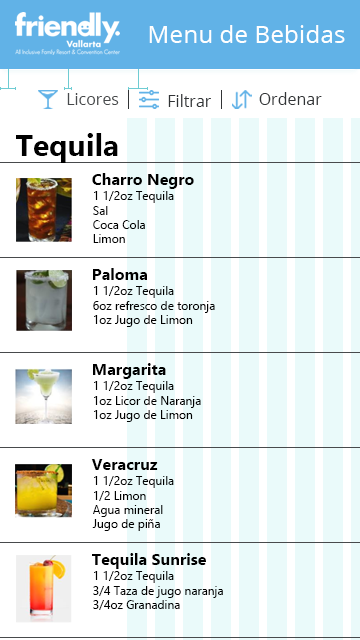
<style>
.page{position:relative;width:360px;height:640px;background:#ffffff}
.page>*{position:absolute;margin:0}
.t1{font:24.4px "OpenSans";color:#ffffff}
.t2{font:16px "OpenSans";color:#484a4c}
.t3{font:16px "OpenSans";color:#313436}
.t4{font:30px "Gadugi-Bold";color:#000000}
.t5{font:16px "Gadugi-Bold";color:#000000}
.t6{font:12px "Gadugi";color:#000000}
</style>
<div class="page">
<p class="t1" style="left:149px;top:25px;width:196px;height:18px">Menu de Bebidas</p>
<p class="t2" style="left:67px;top:93px;width:52px;height:12px">Licores</p>
<p class="t3" style="left:168px;top:94px;width:43px;height:13px">Filtrar</p>
<p class="t3" style="left:259px;top:92px;width:63px;height:13px">Ordenar</p>
<p class="t4" style="left:16px;top:133px;width:102px;height:30px">Tequila</p>
<p class="t5" style="left:92px;top:173px;width:102px;height:16px">Charro Negro</p>
<p class="t6" style="left:93px;top:191px;width:81px;height:52px">1 1/2oz Tequila<br>Sal<br>Coca Cola<br>Limon</p>
<p class="t5" style="left:93px;top:268px;width:54px;height:12px">Paloma</p>
<p class="t6" style="left:93px;top:286px;width:122px;height:41px">1 1/2oz Tequila<br>6oz refresco de toronja<br>1oz Jugo de Limon</p>
<p class="t5" style="left:93px;top:363px;width:73px;height:16px">Margarita</p>
<p class="t6" style="left:94px;top:381px;width:107px;height:41px">1 1/2oz Tequila<br>1oz Licor de Naranja<br>1oz Jugo de Limon</p>
<p class="t5" style="left:91px;top:459px;width:67px;height:11px">Veracruz</p>
<p class="t6" style="left:92px;top:476px;width:82px;height:55px">1 1/2oz Tequila<br>1/2 Limon<br>Agua mineral<br>Jugo de piña</p>
<p class="t5" style="left:92px;top:553px;width:114px;height:16px">Tequila Sunrise</p>
<p class="t6" style="left:93px;top:571px;width:130px;height:39px">1 1/2oz Tequila<br>3/4 Taza de jugo naranja<br>3/4oz Granadina</p>
</div>
